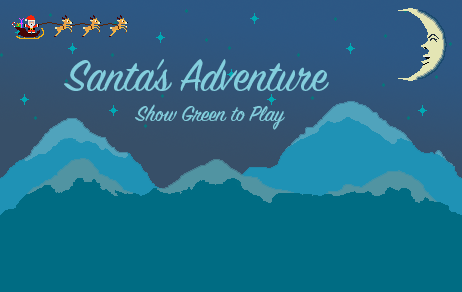
<style>
.page{position:relative;width:462px;height:292px;background:#006c83}
.page>*{position:absolute;margin:0}
.t1{font:48px "SignPainter-HouseScript";color:#83cedd}
.t2{font:24px "SignPainter-HouseScript";color:#83cedd}
</style>
<div class="page">
<p class="t1" style="left:64px;top:59px;width:265px;height:32px">Santa’s Adventure</p>
<p class="t2" style="left:135px;top:104px;width:150px;height:26px">Show Green to Play</p>
</div>
